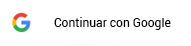
<style>
.page{position:relative;width:191px;height:46px;background:#ffffff}
.page>*{position:absolute;margin:0}
.t1{font:12px "Roboto-Regular";color:#000000}
</style>
<div class="page">
<p class="t1" style="left:54px;top:17px;width:117px;height:13px">Continuar con Google</p>
</div>
